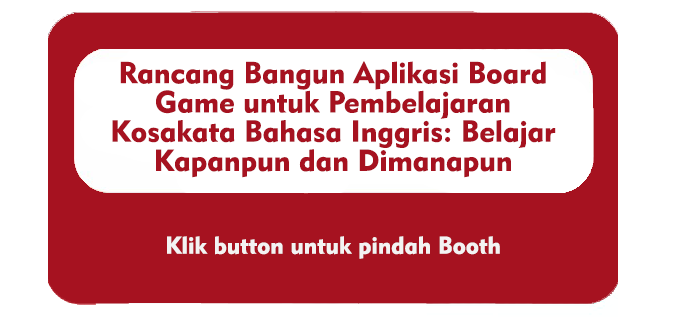
<style>
.page{position:relative;width:689px;height:329px;background:#ffffff}
.page>*{position:absolute;margin:0}
.t1{font:30px/29.2px "Geometric415BT-BlackA";color:#a61220}
.t2{font:24px "Geometric415BT-BlackA";color:#f3f3f3}
</style>
<div class="page">
<p class="t1" style="left:112px;top:61px;width:444px;height:117px;text-align:center">Rancang Bangun Aplikasi Board Game untuk Pembelajaran Kosakata Bahasa Inggris: Belajar Kapanpun dan Dimanapun</p>
<p class="t2" style="left:167px;top:236px;width:333px;height:23px">Klik button untuk pindah Booth</p>
</div>
